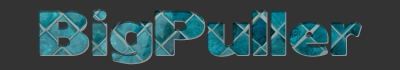
<style>
.page{position:relative;width:400px;height:70px;background:#333333}
.page>*{position:absolute;margin:0}
.t1{font:56.7px "BorisBlackBloxx";scale:1.23 1}
</style>
<div class="page">
<p class="t1" style="left:38px;top:8px;width:323px;height:56px">BigPuller</p>
</div>
